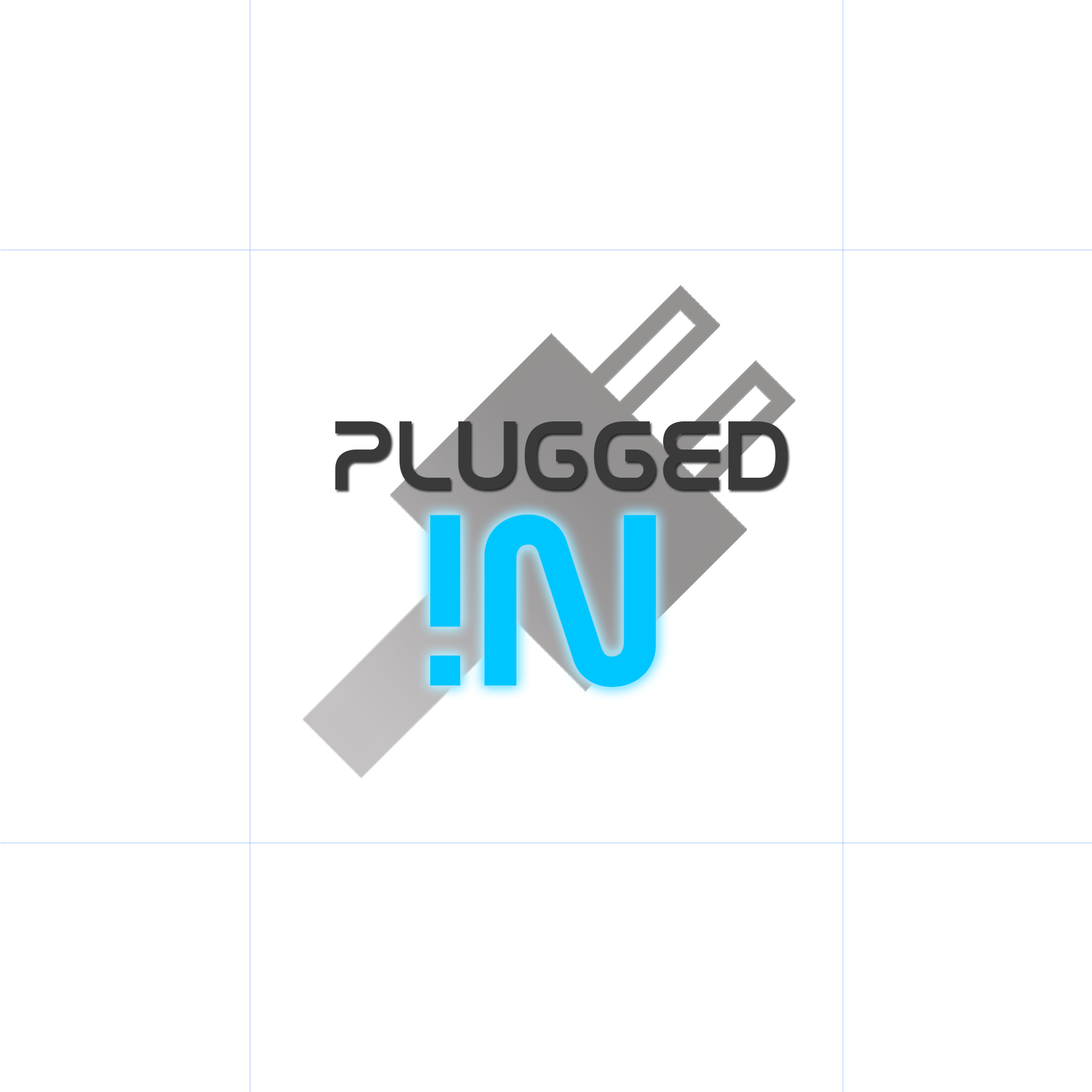
<style>
.page{position:relative;width:1092px;height:1092px;background:#ffffff}
.page>*{position:absolute;margin:0}
.t1{font:98.9px "NasalizationRg-Regular";color:#3a3a3a}
.t2{font:247.3px "NasalizationRg-Regular";color:#00c6ff}
</style>
<div class="page">
<p class="t1" style="left:335px;top:421px;width:453px;height:69px">Plugged</p>
<p class="t2" style="left:430px;top:514px;width:226px;height:173px">N!</p>
</div>
